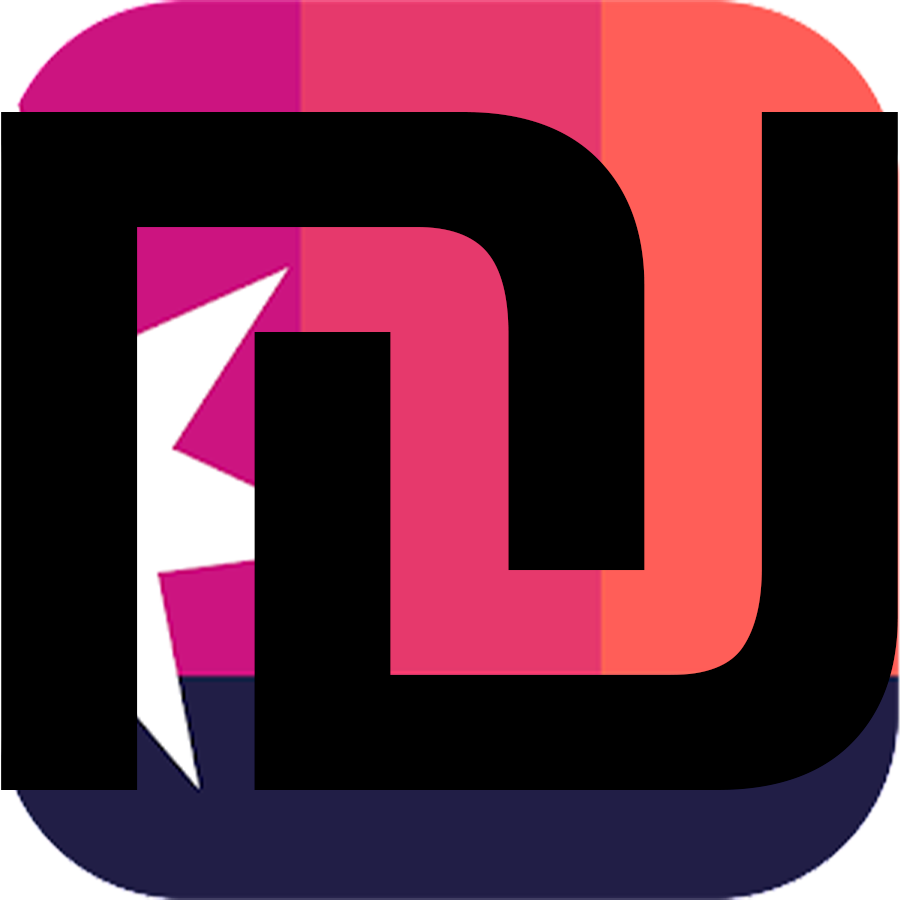
<style>
.page{position:relative;width:900px;height:900px;background:#000000}
.page>*{position:absolute;margin:0}
.t1{font:1306.8px "Arial-BoldMT";color:#000000}
</style>
<div class="page">
<p class="t1" style="left:1px;top:112px;width:897px;height:678px">₪</p>
</div>
